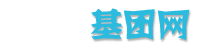
<style>
.page{position:relative;width:200px;height:50px;background:#ffffff}
.page>*{position:absolute;margin:0}
.t1{font:33.3px "FZJZJW--GB1-0";color:#2abbdf}
</style>
<div class="page">
<p class="t1" style="left:90px;top:8px;width:100px;height:32px">基团网</p>
</div>
